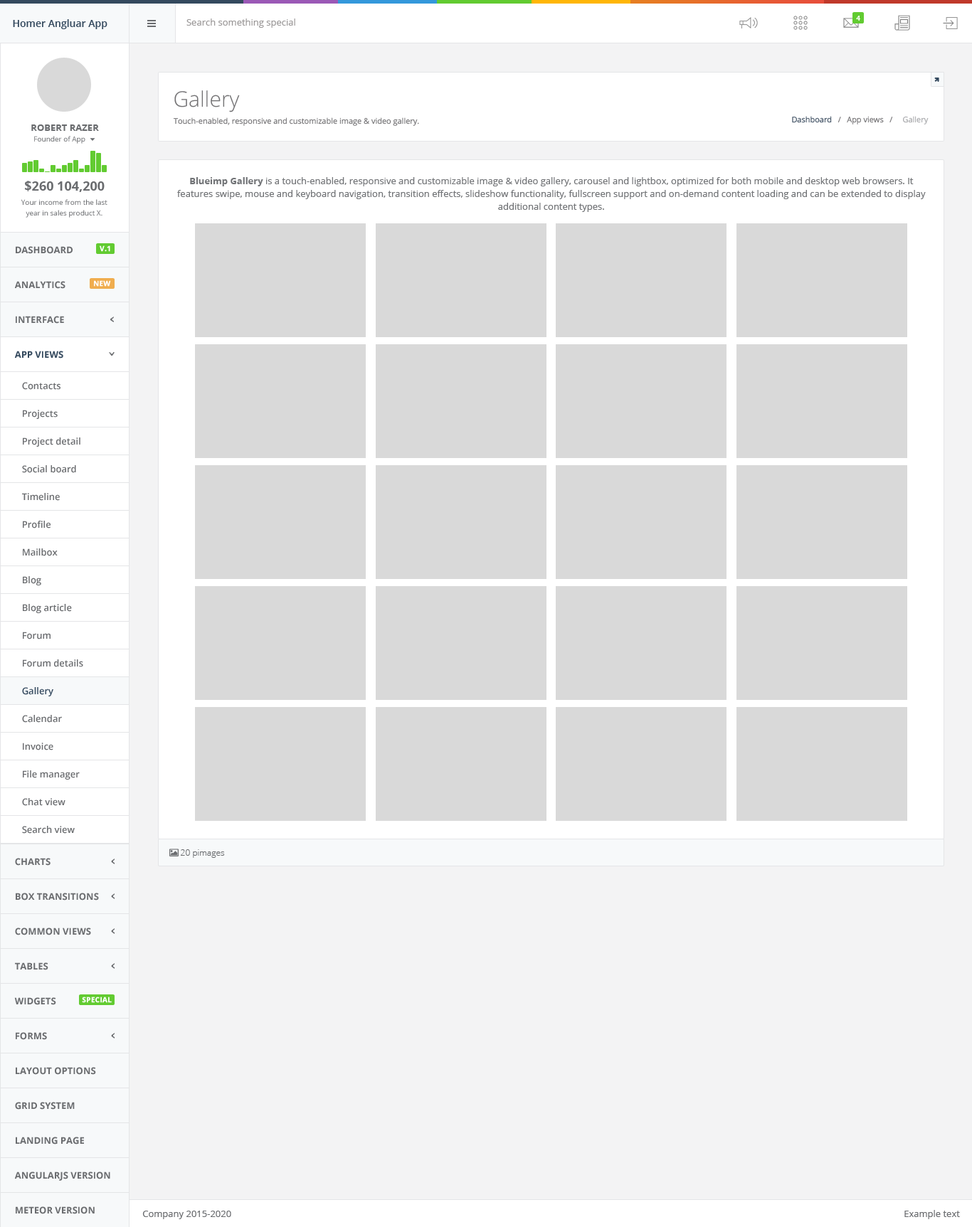
<style>
.page{position:relative;width:972px;height:1227px;background:#d9d9d9}
.page>*{position:absolute;margin:0}
.t1{font:7.1px "OpenSans-Bold";color:#ffffff}
.t2{font:10px "OpenSans-Semibold";color:#34495e}
.t3{font:9.2px "OpenSans";color:#9c9999}
.t4{font:21.3px "OpenSans-Light";color:#727173}
.t5{font:9.2px "OpenSans-Bold";color:#6a6c6f}
.t6{font:7.8px "OpenSans";color:#727173}
.t7{font:7.8px "OpenSans";color:#3c4d60}
.t8{font:7.8px "OpenSans";color:#a5a6a9}
.t9{font:7.1px "OpenSans";color:#6a6c6f}
.t10{font:12.8px "OpenSans-Bold";color:#6a6c6f}
.t11{font:9.2px/12.8px "OpenSans";color:#727477}
.t12{font:9.2px/12.8px "OpenSans-Bold";color:#727477}
.t13{font:7.1px/10.7px "OpenSans";color:#6a6c6f}
.t14{font:7.1px "OpenSans-Bold";color:#ffffff;font-weight:bold}
.t15{font:9.2px "OpenSans-Bold";color:#34495e}
.t16{font:9.2px "OpenSans-Semibold";color:#6a6c6f}
.t17{font:9.2px "OpenSans-Semibold";color:#34495e}
.t18{font:8.5px "OpenSans-Light";color:#6a6c6f}
.t19{font:9.2px "OpenSans";color:#6a6c6f}
</style>
<div class="page">
<p class="t1" style="left:856px;top:16px;width:4px;height:5px">4</p>
<p class="t2" style="left:13px;top:19px;width:94px;height:10px">Homer Angluar App</p>
<p class="t3" style="left:186px;top:18px;width:109px;height:10px">Search something special</p>
<p class="t4" style="left:174px;top:90px;width:66px;height:22px">Gallery</p>
<p class="t5" style="left:31px;top:124px;width:68px;height:7px">ROBERT RAZER</p>
<p class="t6" style="left:173px;top:117px;width:246px;height:9px">Touch-enabled, responsive and customizable image &amp; video gallery.</p>
<p class="t6" style="left:792px;top:116px;width:136px;height:8px"><span class="t7">Dashboard</span>   /   App views   /    <span class="t8"> Gallery</span></p>
<p class="t9" style="left:34px;top:136px;width:51px;height:8px">Founder of App</p>
<p class="t10" style="left:25px;top:181px;width:80px;height:11px">$260 104,200</p>
<p class="t11" style="left:177px;top:177px;width:748px;height:35px;text-align:center"><span class="t12">Blueimp Gallery</span> is a touch-enabled, responsive and customizable image &amp; video gallery, carousel and lightbox, optimized for both mobile and desktop web browsers. It features swipe, mouse and keyboard navigation, transition effects, slideshow functionality, fullscreen support and on-demand content loading and can be extended to display additional content types.</p>
<p class="t13" style="left:21px;top:199px;width:86px;height:19px;text-align:center">Your income from the last<br>year in sales product X.</p>
<p class="t14" style="left:100px;top:245px;width:10px;height:7px">V.1</p>
<p class="t5" style="left:16px;top:246px;width:57px;height:8px">DASHBOARD</p>
<p class="t5" style="left:14px;top:281px;width:51px;height:8px">ANALYTICS</p>
<p class="t14" style="left:94px;top:280px;width:17px;height:7px">NEW</p>
<p class="t5" style="left:16px;top:316px;width:48px;height:8px">INTERFACE</p>
<p class="t15" style="left:14px;top:351px;width:49px;height:8px">APP VIEWS</p>
<p class="t16" style="left:22px;top:382px;width:38px;height:8px">Contacts</p>
<p class="t16" style="left:23px;top:410px;width:35px;height:9px">Projects</p>
<p class="t16" style="left:23px;top:437px;width:57px;height:10px">Project detail</p>
<p class="t16" style="left:22px;top:465px;width:54px;height:8px">Social board</p>
<p class="t16" style="left:22px;top:493px;width:38px;height:8px">Timeline</p>
<p class="t16" style="left:23px;top:521px;width:28px;height:8px">Profile</p>
<p class="t16" style="left:23px;top:548px;width:35px;height:8px">Mailbox</p>
<p class="t16" style="left:23px;top:576px;width:18px;height:9px">Blog</p>
<p class="t16" style="left:23px;top:604px;width:49px;height:9px">Blog article</p>
<p class="t16" style="left:23px;top:632px;width:28px;height:8px">Forum</p>
<p class="t16" style="left:23px;top:659px;width:60px;height:8px">Forum details</p>
<p class="t17" style="left:22px;top:687px;width:31px;height:9px">Gallery</p>
<p class="t16" style="left:22px;top:715px;width:40px;height:8px">Calendar</p>
<p class="t16" style="left:23px;top:743px;width:30px;height:7px">Invoice</p>
<p class="t16" style="left:23px;top:770px;width:57px;height:10px">File manager</p>
<p class="t16" style="left:22px;top:798px;width:43px;height:8px">Chat view</p>
<p class="t16" style="left:22px;top:826px;width:53px;height:8px">Search view</p>
<p class="t5" style="left:15px;top:858px;width:36px;height:8px">CHARTS</p>
<p class="t18" style="left:181px;top:849px;width:44px;height:9px">20 pimages</p>
<p class="t5" style="left:16px;top:893px;width:83px;height:8px">BOX TRANSITIONS</p>
<p class="t5" style="left:15px;top:928px;width:76px;height:7px">COMMON VIEWS</p>
<p class="t5" style="left:15px;top:962px;width:33px;height:8px">TABLES</p>
<p class="t5" style="left:14px;top:997px;width:42px;height:8px">WIDGETS</p>
<p class="t14" style="left:82px;top:997px;width:30px;height:6px">SPECIAL</p>
<p class="t5" style="left:16px;top:1032px;width:31px;height:8px">FORMS</p>
<p class="t5" style="left:16px;top:1067px;width:80px;height:8px">LAYOUT OPTIONS</p>
<p class="t5" style="left:15px;top:1102px;width:60px;height:8px">GRID SYSTEM</p>
<p class="t5" style="left:16px;top:1137px;width:68px;height:8px">LANDING PAGE</p>
<p class="t5" style="left:14px;top:1172px;width:96px;height:9px">ANGULARJS VERSION</p>
<p class="t5" style="left:16px;top:1206px;width:79px;height:8px">METEOR VERSION</p>
<p class="t19" style="left:142px;top:1211px;width:89px;height:8px">Company 2015-2020</p>
<p class="t19" style="left:904px;top:1210px;width:56px;height:9px">Example text</p>
</div>
